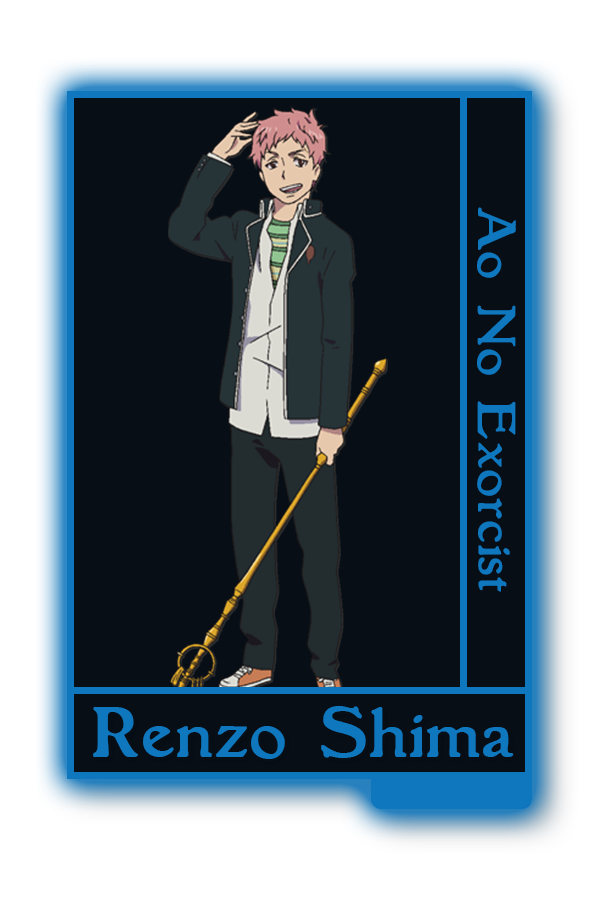
<style>
.page{position:relative;width:600px;height:900px;background:#070e16}
.page>*{position:absolute;margin:0}
.t1{font:48.8px "Grantham-Roman";color:#0f77be}
.t2{font:65.2px "Grantham-Roman";color:#0f77be}
</style>
<div class="page">
<p class="t1" style="left:477px;top:207px;width:39px;height:385px;rotate:90deg">Ao No Exorcist</p>
<p class="t2" style="left:93px;top:706px;width:421px;height:53px">Renzo Shima</p>
</div>
